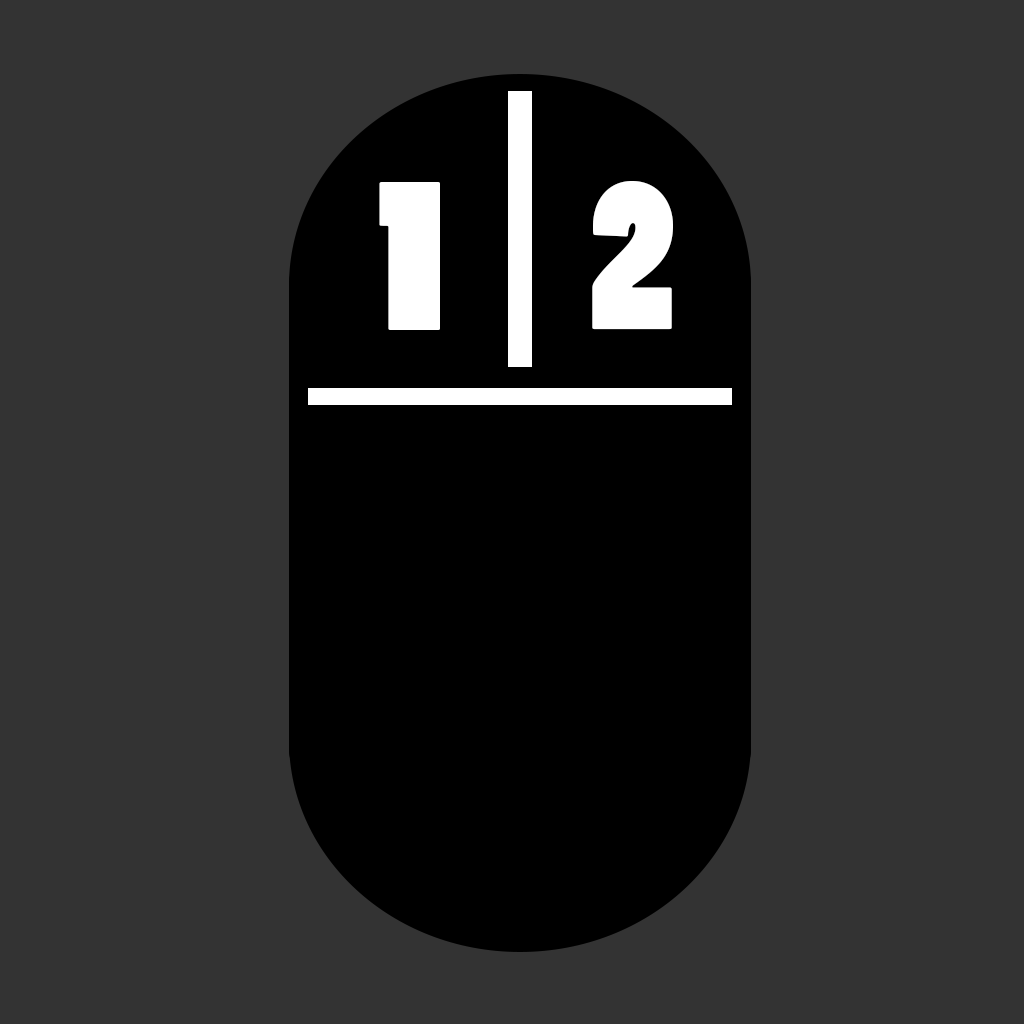
<style>
.page{position:relative;width:1024px;height:1024px;background:#333333}
.page>*{position:absolute;margin:0}
.t1{font:200.2px "PoplarStd";color:#ffffff;scale:1.28 1}
.t2{font:200px "PoplarStd";color:#ffffff}
</style>
<div class="page">
<p class="t1" style="left:379px;top:182px;width:61px;height:148px">1</p>
<p class="t2" style="left:592px;top:181px;width:81px;height:149px">2</p>
</div>
